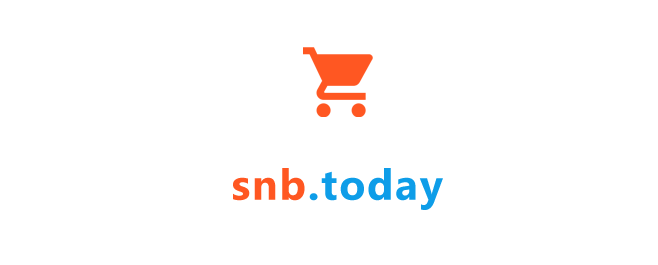
<style>
.page{position:relative;width:658px;height:265px;background:#ffffff}
.page>*{position:absolute;margin:0}
.t1{font:42.7px "SegoeUI-Bold";letter-spacing:0.04em;color:#0e9de8}
.t2{font:42.7px "SegoeUI-Bold";letter-spacing:0.04em;color:#ff5722}
</style>
<div class="page">
<p class="t1" style="left:233px;top:168px;width:210px;height:42px"><span class="t2">snb</span>.today</p>
</div>
